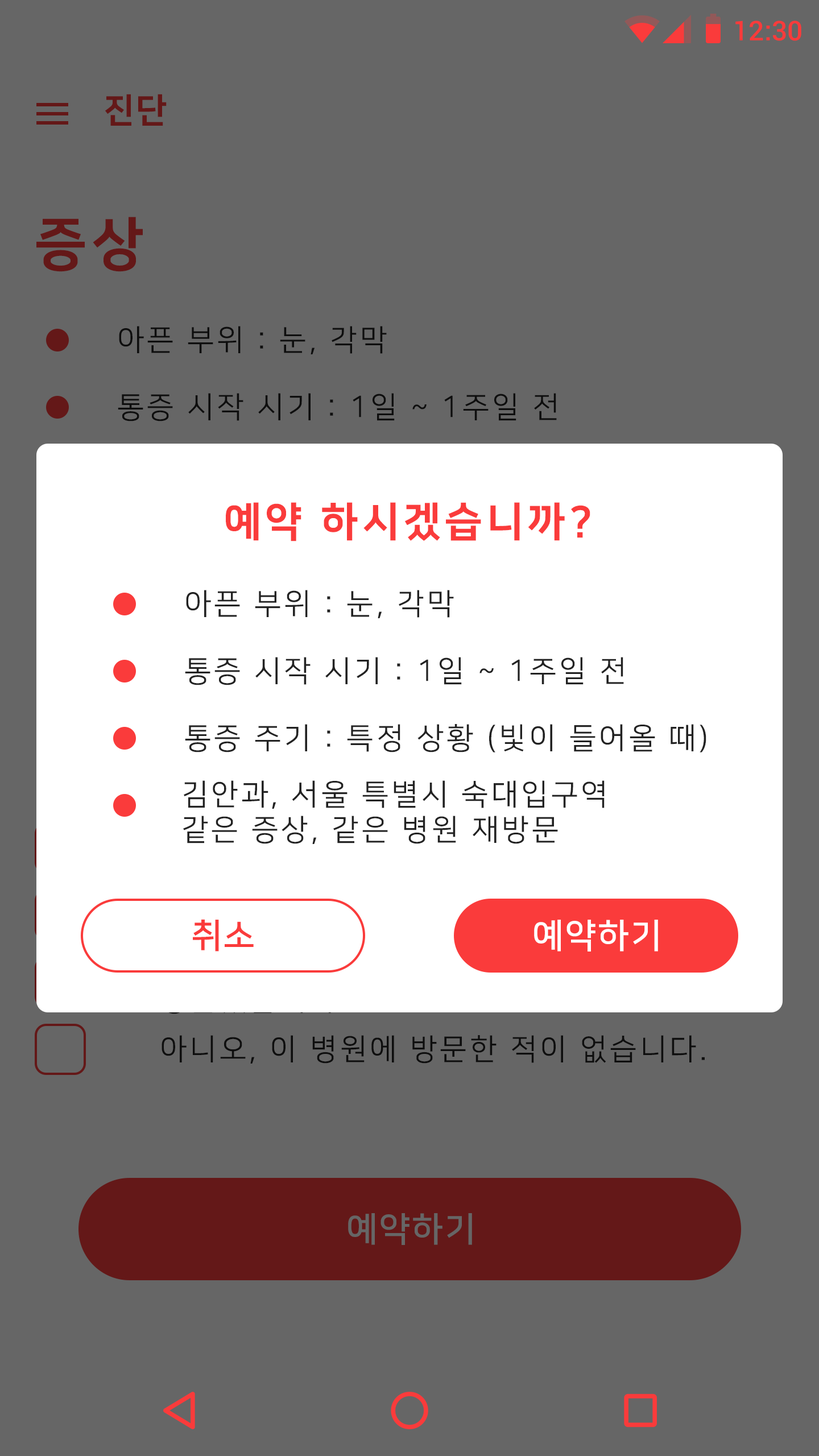
<style>
.page{position:relative;width:819px;height:1456px;background:#666666}
.page>*{position:absolute;margin:0}
.t1{font:27.3px "Roboto-Medium";color:#fa3b3b}
.t2{font:34.1px "NanumSquareEB";letter-spacing:0.05em;color:#641818}
.t3{font:56.9px "NanumSquareEB";letter-spacing:0.1em;color:#641818}
.t4{font:29.6px "NanumSquareR";letter-spacing:0.1em;color:#222222}
.t5{font:40.9px "NanumSquareEB";letter-spacing:0.1em;color:#fa3b3b}
.t6{font:34.1px "NanumSquareB";letter-spacing:0.05em;color:#fa3b3b}
.t7{font:34.1px "NanumSquareB";letter-spacing:0.05em;color:#ffffff}
.t8{font:34.1px "NanumSquareB";letter-spacing:0.05em;color:#666666}
</style>
<div class="page">
<p class="t1" style="left:735px;top:20px;width:66px;height:21px">12:30</p>
<p class="t2" style="left:105px;top:94px;width:62px;height:32px">진단</p>
<p class="t3" style="left:36px;top:217px;width:107px;height:55px">증상</p>
<p class="t4" style="left:119px;top:326px;width:268px;height:28px">아픈 부위 : 눈, 각막</p>
<p class="t4" style="left:118px;top:393px;width:439px;height:28px">통증 시작 시기 : 1일 ~ 1주일 전</p>
<p class="t5" style="left:226px;top:502px;width:364px;height:39px">예약 하시겠습니까?</p>
<p class="t4" style="left:186px;top:590px;width:268px;height:28px">아픈 부위 : 눈, 각막</p>
<p class="t4" style="left:185px;top:657px;width:439px;height:28px">통증 시작 시기 : 1일 ~ 1주일 전</p>
<p class="t4" style="left:185px;top:724px;width:521px;height:28px">통증 주기 : 특정 상황 (빛이 들어올 때)</p>
<p class="t4" style="left:183px;top:780px;width:422px;height:64px">김안과, 서울 특별시 숙대입구역<br>같은 증상, 같은 병원 재방문</p>
<p class="t6" style="left:193px;top:919px;width:61px;height:33px">취소</p>
<p class="t7" style="left:534px;top:920px;width:124px;height:32px">예약하기</p>
<p class="t4" style="left:162px;top:1035px;width:543px;height:29px">아니오, 이 병원에 방문한 적이 없습니다.</p>
<p class="t8" style="left:348px;top:1213px;width:124px;height:32px">예약하기</p>
</div>
